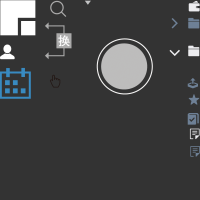
<style>
.page{position:relative;width:200px;height:200px;background:#333333}
.page>*{position:absolute;margin:0}
.t1{font:12px "SimHei";color:#ffffff}
</style>
<div class="page">
<p class="t1" style="left:58px;top:35px;width:12px;height:12px">换</p>
</div>
